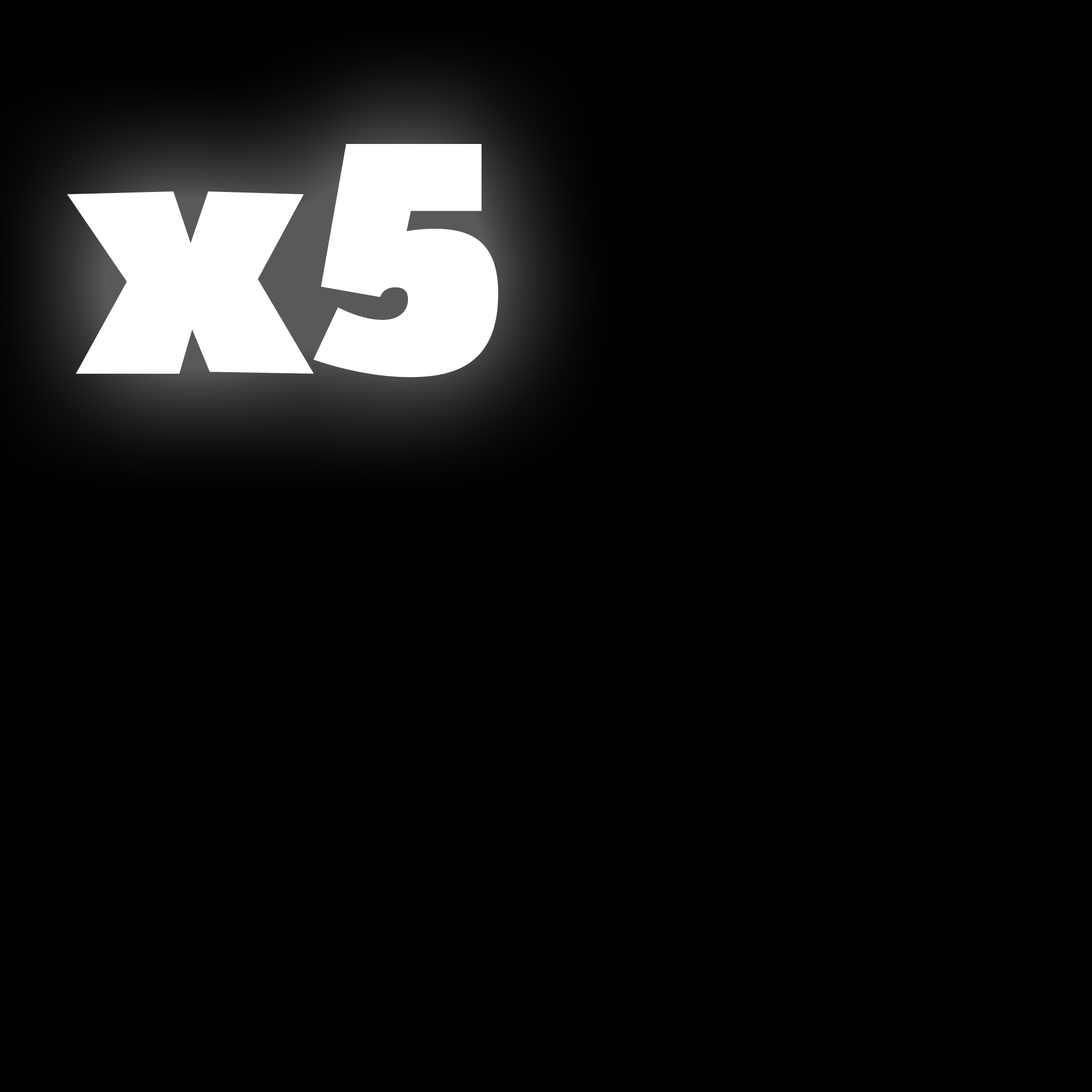
<style>
.page{position:relative;width:1092px;height:1092px;background:#000000}
.page>*{position:absolute;margin:0}
.t1{font:314.1px "Bumpo";color:#ffffff}
.t2{font:239.4px "Bumpo";color:#ffffff}
</style>
<div class="page">
<p class="t1" style="left:67px;top:144px;width:432px;height:234px">x5<span class="t2">#3</span></p>
</div>
